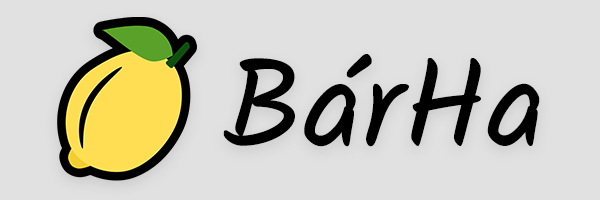
<style>
.page{position:relative;width:600px;height:200px;background:#e1e1e1}
.page>*{position:absolute;margin:0}
.t1{font:125px "Kalam-Regular";color:#000000}
</style>
<div class="page">
<p class="t1" style="left:223px;top:54px;width:317px;height:93px">BárHa</p>
</div>
